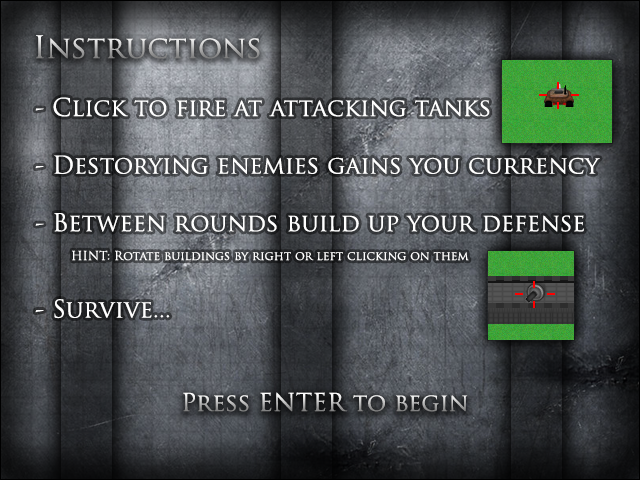
<style>
.page{position:relative;width:640px;height:480px}
.page>*{position:absolute;margin:0}
.t1{font:30px "TrajanPro-Regular"}
.t2{font:24px "TrajanPro-Regular";color:#ffffff}
.t3{font:12px "TrajanPro-Regular";color:#ffffff}
.t4{font:24px "TrajanPro-Regular"}
</style>
<div class="page">
<p class="t1" style="left:36px;top:35px;width:224px;height:24px">Instructions</p>
<p class="t2" style="left:35px;top:97px;width:565px;height:222px">- Click to fire at attacking tanks<br><br>- Destorying enemies gains you currency<br><br>- Between rounds build up your defense<br> <span class="t3">HINT: Rotate buildings by right or left clicking on them<br></span><br>- Survive...</p>
<p class="t4" style="left:183px;top:392px;width:285px;height:20px">Press ENTER to begin</p>
</div>
